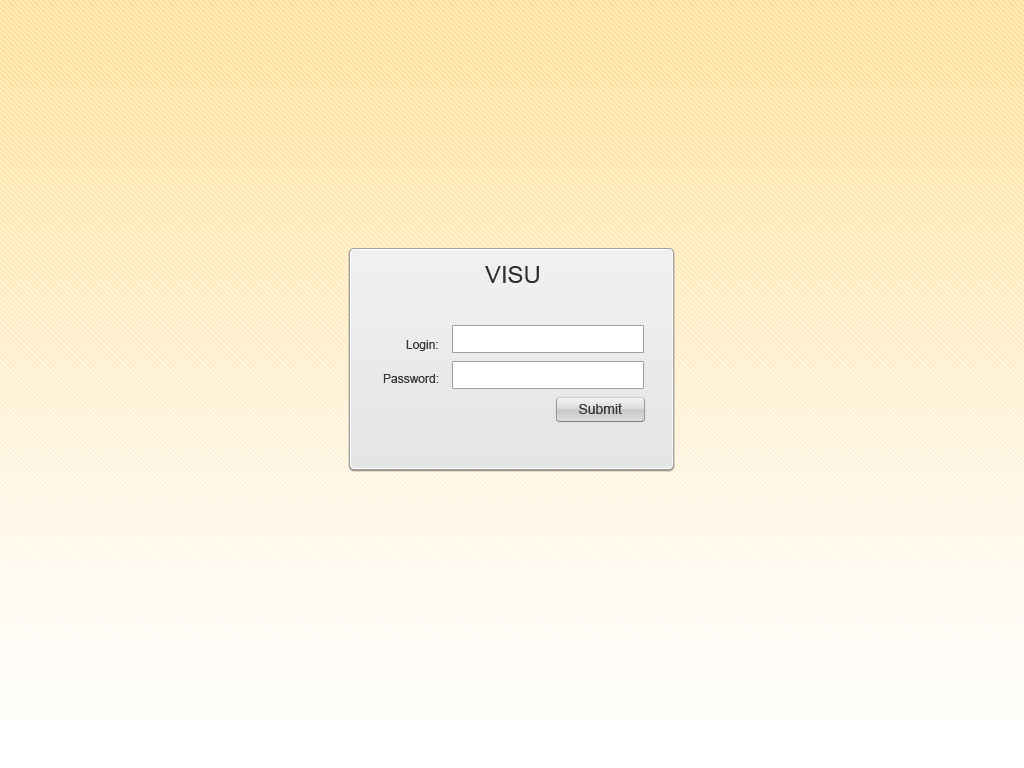
<style>
.page{position:relative;width:1024px;height:768px}
.page>*{position:absolute;margin:0}
.t1{font:24px "ArialMT";color:#2e2e2e}
.t2{font:12px "ArialMT";color:#363636}
.t3{font:14px "ArialMT";color:#363636}
</style>
<div class="page">
<p class="t1" style="left:485px;top:266px;width:54px;height:17px">VISU</p>
<p class="t2" style="left:406px;top:340px;width:32px;height:11px">Login:</p>
<p class="t2" style="left:383px;top:374px;width:56px;height:9px">Password:</p>
<p class="t3" style="left:579px;top:403px;width:43px;height:11px">Submit</p>
</div>
